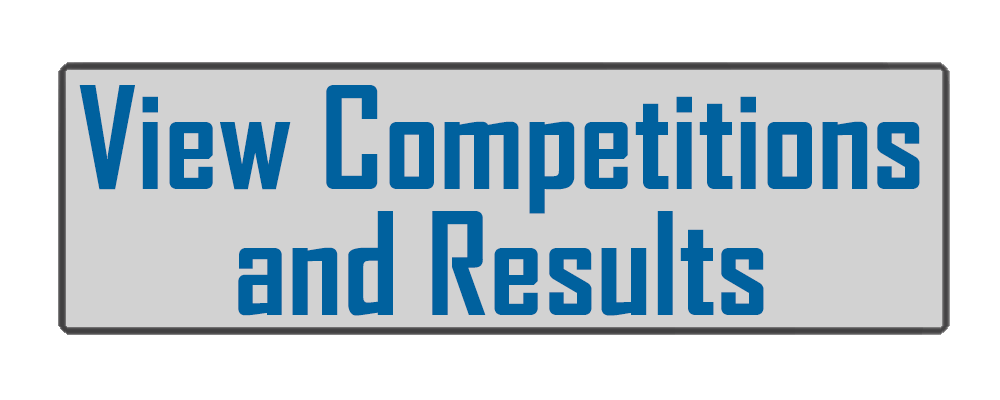
<style>
.page{position:relative;width:1000px;height:400px;background:#d2d2d2}
.page>*{position:absolute;margin:0}
.t1{font:136px/126px "AgencyFB-Bold";color:#00619e}
</style>
<div class="page">
<p class="t1" style="left:79px;top:85px;width:841px;height:231px;text-align:center">View Competitions<br>and Results</p>
</div>
